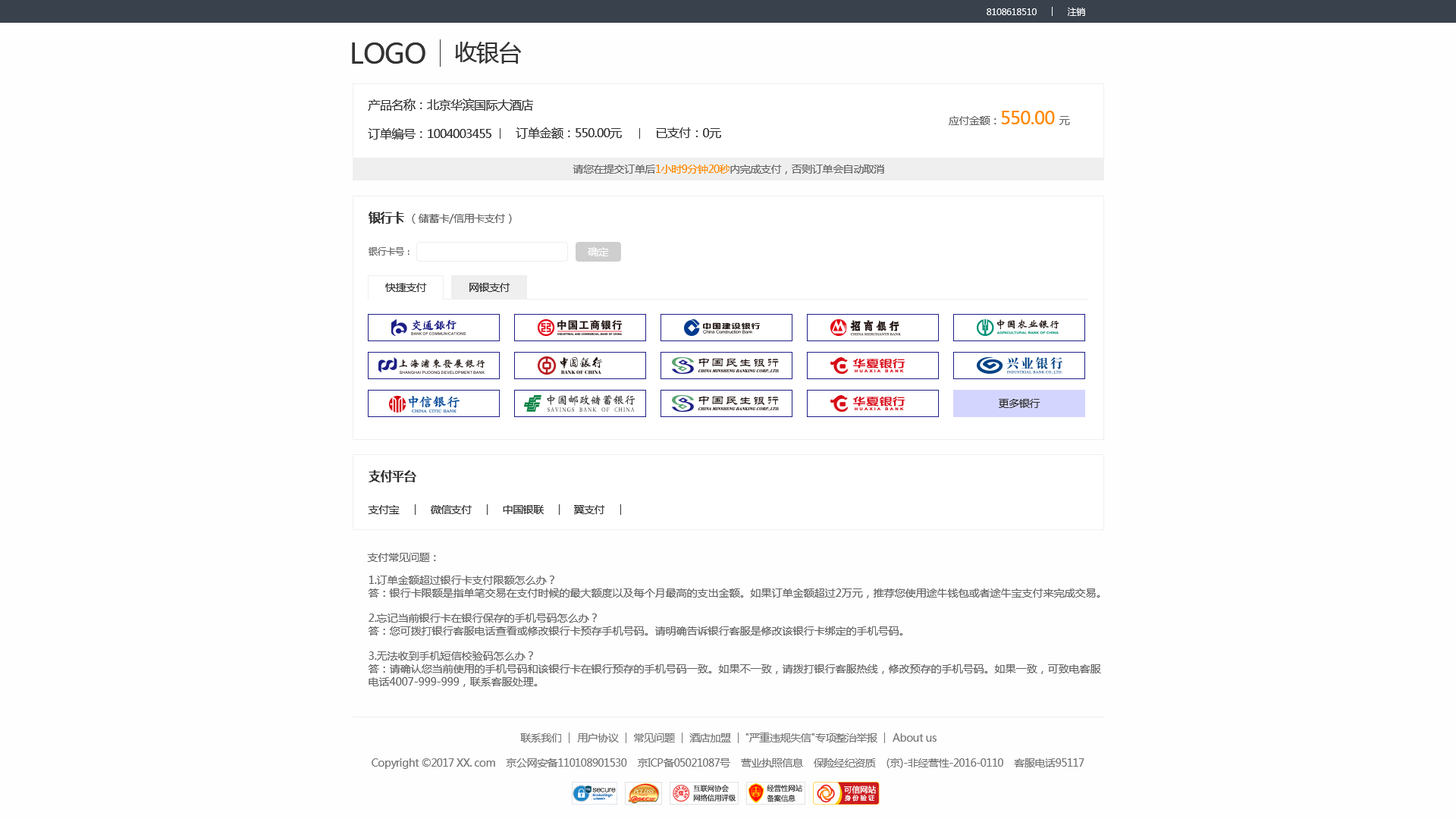
<style>
.page{position:relative;width:1456px;height:819px;background:#fefefe}
.page>*{position:absolute;margin:0}
.t1{font:9.1px "MicrosoftYaHei";letter-spacing:-0.03em;color:#ffffff}
.t2{font:22.7px "MicrosoftYaHei";letter-spacing:-0.03em;color:#333333}
.t3{font:27.3px "MicrosoftYaHei";letter-spacing:-0.03em;color:#333333}
.t4{font:12.1px "MicrosoftYaHei";letter-spacing:-0.03em;color:#333333}
.t5{font:18.2px "MicrosoftYaHei";letter-spacing:-0.03em;color:#ff8800}
.t6{font:10.6px "MicrosoftYaHei";letter-spacing:-0.03em;color:#666666}
.t7{font:10.6px "MicrosoftYaHei";letter-spacing:-0.03em;color:#ff8800}
.t8{font:12.1px "MicrosoftYaHei-Bold";letter-spacing:-0.03em;color:#333333}
.t9{font:9.1px "MicrosoftYaHei";letter-spacing:-0.03em;color:#666666}
.t10{font:10.6px "MicrosoftYaHei";letter-spacing:-0.03em;color:#ffffff}
.t11{font:10.6px "MicrosoftYaHei";letter-spacing:-0.03em;color:#333333}
.t12{font:10.6px "MicrosoftYaHei";color:#666666}
.t13{font:10.6px "MicrosoftYaHei";letter-spacing:-0.03em;color:#777777}
</style>
<div class="page">
<p class="t1" style="left:987px;top:8px;width:50px;height:7px">8108618510</p>
<p class="t1" style="left:1068px;top:8px;width:17px;height:8px">注销</p>
<p class="t2" style="left:455px;top:42px;width:67px;height:22px">收银台</p>
<p class="t3" style="left:352px;top:42px;width:73px;height:22px">LOGO</p>
<p class="t4" style="left:368px;top:99px;width:165px;height:12px">产品名称：北京华滨国际大酒店</p>
<p class="t5" style="left:949px;top:111px;width:121px;height:14px"><span class="t6">应付金额：</span>550.00 <span class="t6">元</span></p>
<p class="t4" style="left:368px;top:128px;width:123px;height:12px">订单编号：1004003455</p>
<p class="t4" style="left:516px;top:127px;width:106px;height:12px">订单金额：550.00元</p>
<p class="t4" style="left:656px;top:127px;width:65px;height:12px">已支付：0元</p>
<p class="t6" style="left:573px;top:165px;width:311px;height:9px">请您在提交订单后<span class="t7">1小时9分钟20秒</span>内完成支付，否则订单会自动取消</p>
<p class="t8" style="left:369px;top:212px;width:35px;height:12px">银行卡</p>
<p class="t6" style="left:412px;top:214px;width:100px;height:10px">（储蓄卡/信用卡支付）</p>
<p class="t9" style="left:369px;top:247px;width:40px;height:9px">银行卡号：</p>
<p class="t10" style="left:588px;top:247px;width:21px;height:9px">确定</p>
<p class="t11" style="left:385px;top:283px;width:42px;height:9px">快捷支付</p>
<p class="t11" style="left:469px;top:283px;width:41px;height:9px">网银支付</p>
<p class="t11" style="left:999px;top:399px;width:41px;height:9px">更多银行</p>
<p class="t8" style="left:369px;top:470px;width:47px;height:12px">支付平台</p>
<p class="t11" style="left:368px;top:505px;width:32px;height:9px">支付宝</p>
<p class="t11" style="left:431px;top:505px;width:41px;height:9px">微信支付</p>
<p class="t11" style="left:503px;top:505px;width:41px;height:9px">中国银联</p>
<p class="t11" style="left:574px;top:505px;width:31px;height:9px">翼支付</p>
<p class="t6" style="left:367px;top:553px;width:69px;height:9px">支付常见问题：</p>
<p class="t12" style="left:369px;top:576px;width:731px;height:22px">1.订单金额超过银行卡支付限额怎么办？<br>答：银行卡限额是指单笔交易在支付时候的最大额度以及每个月最高的支出金额。如果订单金额超过2万元，推荐您使用途牛钱包或者途牛宝支付来完成交易。</p>
<p class="t12" style="left:369px;top:613px;width:534px;height:22px">2.忘记当前银行卡在银行保存的手机号码怎么办？<br>答：您可拨打银行客服电话查看或修改银行卡预存手机号码。请明确告诉银行客服是修改该银行卡绑定的手机号码。</p>
<p class="t12" style="left:369px;top:651px;width:732px;height:36px">3.无法收到手机短信校验码怎么办？<br>答：请确认您当前使用的手机号码和该银行卡在银行预存的手机号码一致。如果不一致，请拨打银行客服热线，修改预存的手机号码。如果一致，可致电客服<br>电话4007-999-999，联系客服处理。</p>
<p class="t13" style="left:520px;top:733px;width:41px;height:9px">联系我们</p>
<p class="t13" style="left:577px;top:733px;width:42px;height:9px">用户协议</p>
<p class="t13" style="left:634px;top:733px;width:41px;height:9px">常见问题</p>
<p class="t13" style="left:689px;top:733px;width:42px;height:9px">酒店加盟</p>
<p class="t13" style="left:745px;top:733px;width:132px;height:9px">"严重违规失信"专项整治举报</p>
<p class="t13" style="left:893px;top:733px;width:44px;height:9px">About us</p>
<p class="t13" style="left:372px;top:758px;width:712px;height:11px">Copyright ©2017 XX. com    京公网安备110108901530    京ICP备05021087号    营业执照信息    保险经纪资质    (京)-非经营性-2016-0110    客服电话95117</p>
</div>
